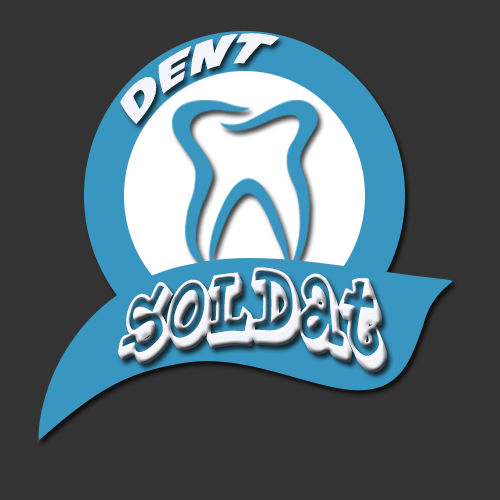
<style>
.page{position:relative;width:500px;height:500px;background:#333333}
.page>*{position:absolute;margin:0}
.t1{font:37.4px "AvengeanceMightiestAvenger";color:#f3f3fa;scale:1.28 1}
.t2{font:84px "PlanetBenson2";color:#f3f3fa;scale:0.69 1}
</style>
<div class="page">
<p class="t1" style="left:120px;top:33px;width:160px;height:91px;rotate:-25deg">dent</p>
<p class="t2" style="left:117px;top:267px;width:271px;height:106px">Soldat</p>
</div>
